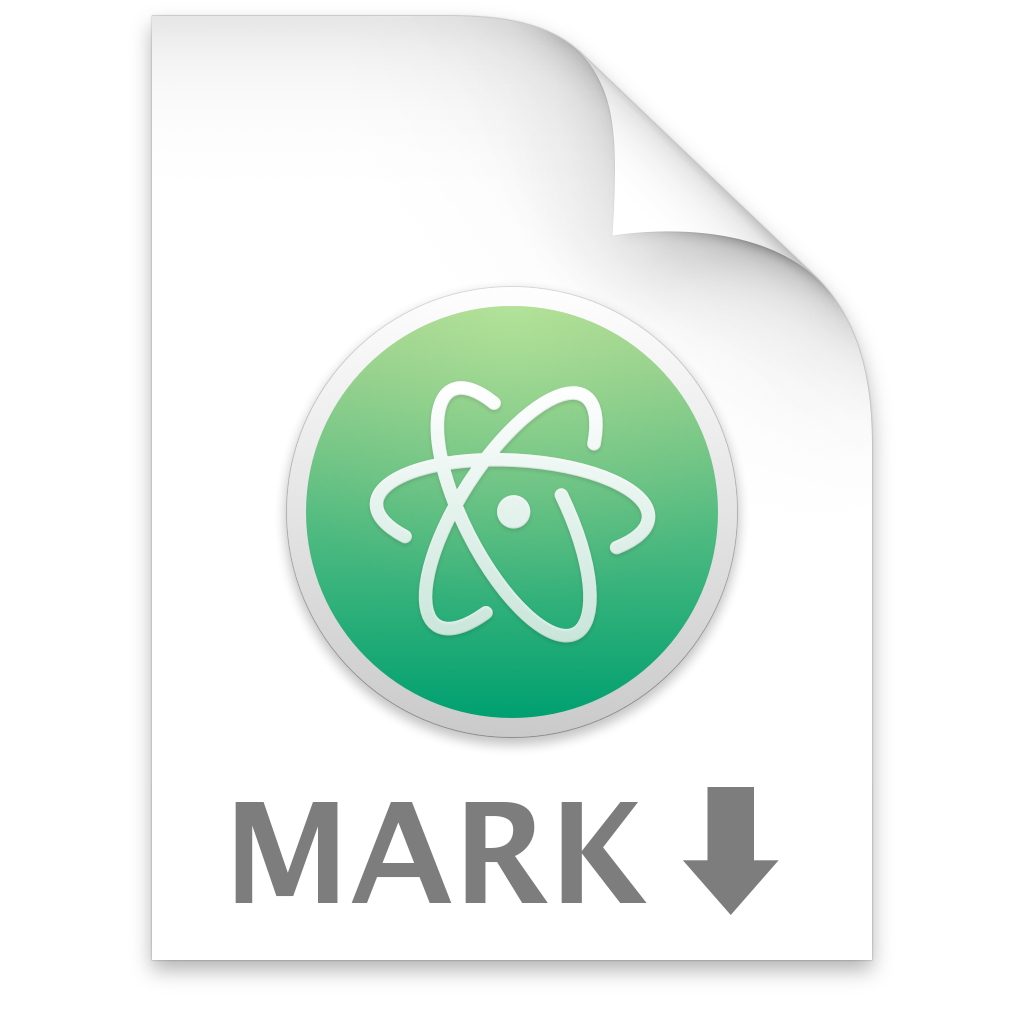
<style>
.page{position:relative;width:1024px;height:1024px;background:#ffffff}
.page>*{position:absolute;margin:0}
.t1{font:140px "LucidaGrande-Bold";color:#7d7d7d}
.t2{font:140px "LucidaGrande-Bold";letter-spacing:-0.12em;color:#7d7d7d}
.t3{font:140px "KozGoPr6N-ExtraLight";letter-spacing:-0.12em;color:#7d7d7d}
</style>
<div class="page">
<p class="t1" style="left:235px;top:787px;width:544px;height:128px">MAR<span class="t2">K </span><span class="t3">⬇</span></p>
</div>
